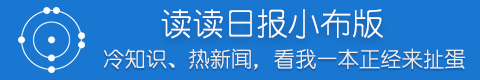
<style>
.page{position:relative;width:480px;height:80px;background:#1977d2}
.page>*{position:absolute;margin:0}
.t1{font:32px "YouYuan";color:#ffffff}
.t2{font:21.3px "YouYuan";color:#ededed}
</style>
<div class="page">
<p class="t1" style="left:161px;top:9px;width:222px;height:30px">读读日报小布版</p>
<p class="t2" style="left:104px;top:48px;width:361px;height:22px">冷知识、热新闻，看我一本正经来扯蛋</p>
</div>
